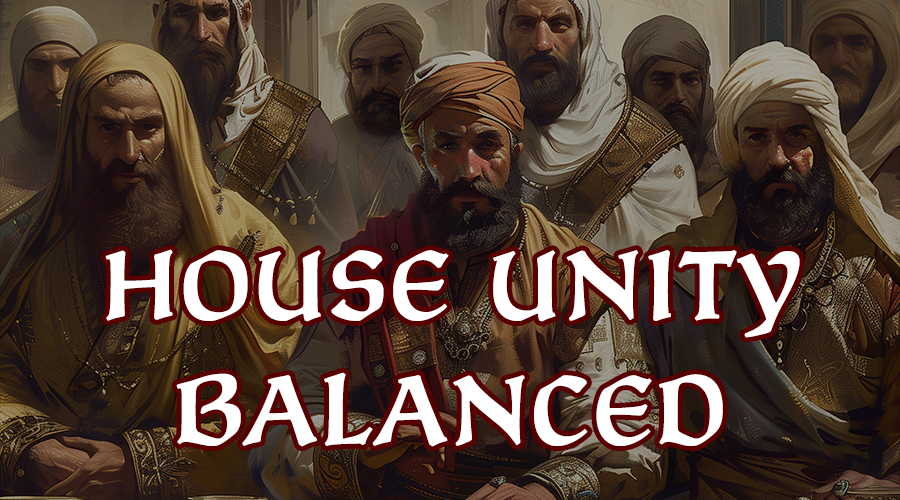
<style>
.page{position:relative;width:900px;height:500px}
.page>*{position:absolute;margin:0}
.t1{font:125px/125px "ParadoxKingScript-Regular";color:#ffffff}
</style>
<div class="page">
<p class="t1" style="left:105px;top:249px;width:695px;height:198px;text-align:center">House unity<br>balanced</p>
</div>
